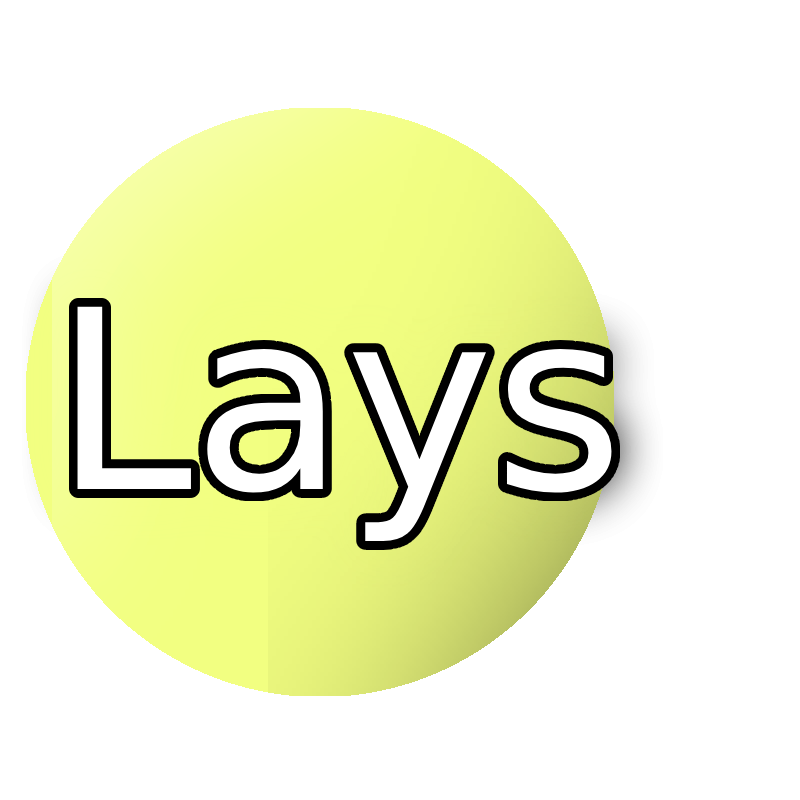
<style>
.page{position:relative;width:800px;height:800px;background:#ffffff}
.page>*{position:absolute;margin:0}
.t1{font:250px "SegoeUIHistoric";color:#ffffff}
</style>
<div class="page">
<p class="t1" style="left:77px;top:304px;width:535px;height:236px">Lays</p>
<p class="t1" style="left:77px;top:306px;width:535px;height:236px">Lays</p>
</div>
